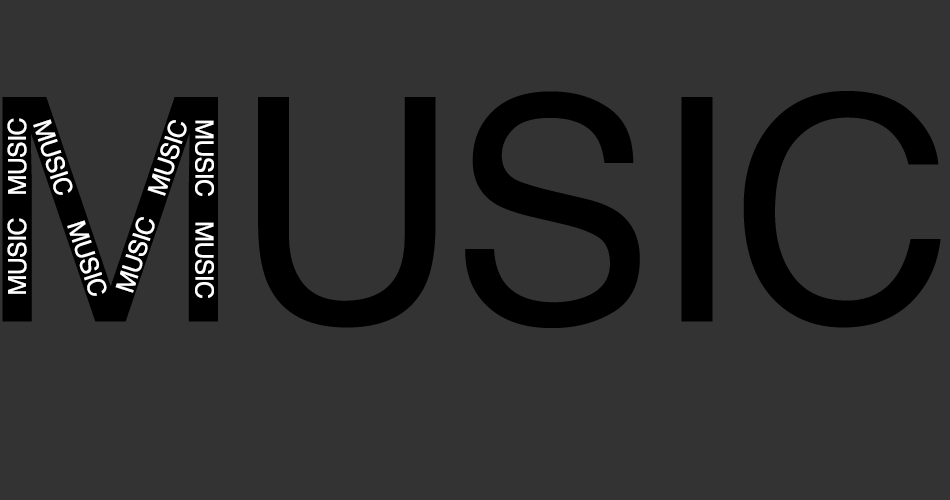
<style>
.page{position:relative;width:950px;height:500px;background:#333333}
.page>*{position:absolute;margin:0}
.t1{font:312.7px "Helvetica";letter-spacing:-0.025em;color:#000000}
.t2{font:25px "Helvetica";letter-spacing:-0.025em;color:#ffffff}
</style>
<div class="page">
<p class="t1" style="left:2px;top:91px;width:939px;height:237px">MUSIC</p>
<p class="t2" style="left:7px;top:118px;width:20px;height:76px;rotate:-90deg">MUSIC</p>
<p class="t2" style="left:33px;top:119px;width:40px;height:76px;rotate:72deg">MUSIC</p>
<p class="t2" style="left:147px;top:120px;width:40px;height:76px;rotate:-72deg">MUSIC</p>
<p class="t2" style="left:195px;top:120px;width:19px;height:76px;rotate:90deg">MUSIC</p>
<p class="t2" style="left:7px;top:218px;width:20px;height:76px;rotate:-90deg">MUSIC</p>
<p class="t2" style="left:67px;top:220px;width:40px;height:76px;rotate:72deg">MUSIC</p>
<p class="t2" style="left:115px;top:217px;width:40px;height:76px;rotate:-72deg">MUSIC</p>
<p class="t2" style="left:195px;top:222px;width:19px;height:76px;rotate:90deg">MUSIC</p>
</div>
